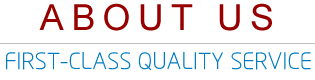
<style>
.page{position:relative;width:315px;height:80px;background:#ffffff}
.page>*{position:absolute;margin:0}
.t1{font:36px "ArialMT";letter-spacing:0.2em;color:#960000;text-transform:uppercase}
.t2{font:24px "MFYueHei_Noncommercial-Light";color:#007cc2;text-transform:uppercase}
</style>
<div class="page">
<p class="t1" style="left:39px;top:3px;width:233px;height:28px">ABOUT US</p>
<p class="t2" style="left:6px;top:52px;width:305px;height:19px">First-class quality service</p>
</div>
